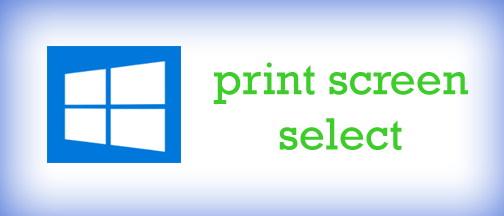
<style>
.page{position:relative;width:504px;height:216px;background:#ffffff}
.page>*{position:absolute;margin:0}
.t1{font:46px "Rockwell";color:#3dcc2a}
</style>
<div class="page">
<p class="t1" style="left:213px;top:62px;width:255px;height:88px;text-align:center">print screen select</p>
</div>
